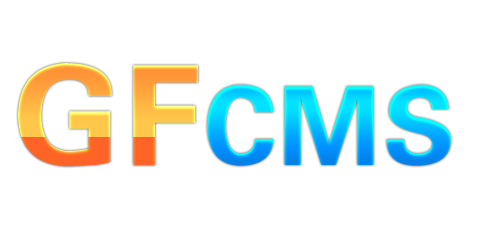
<style>
.page{position:relative;width:500px;height:250px;background:#ffffff}
.page>*{position:absolute;margin:0}
.t1{font:137.1px "FZDHTJW--GB1-0";font-weight:bold}
.t2{font:107.8px "FZDHTJW--GB1-0";font-weight:bold}
</style>
<div class="page">
<p class="t1" style="left:18px;top:63px;width:180px;height:104px">GF</p>
<p class="t2" style="left:207px;top:84px;width:244px;height:82px">CMS</p>
</div>
